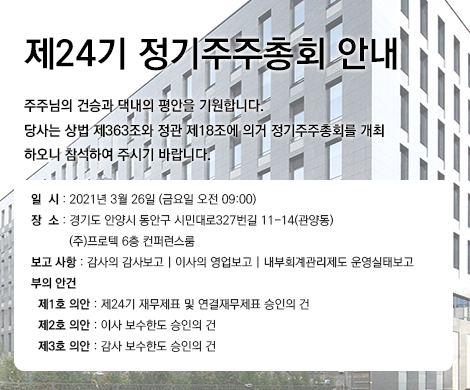
<style>
.page{position:relative;width:470px;height:390px;background:#ffffff}
.page>*{position:absolute;margin:0}
.t1{font:14px "KoPubDotumBold";color:#000000}
.t2{font:36px "KoPubDotumBold";color:#000000}
.t3{font:12px "KoPubDotumBold";color:#000000}
.t4{font:12px "KoPubDotumLight";color:#000000}
</style>
<div class="page">
<p class="t1" style="left:24px;top:37px;width:390px;height:315px"><span class="t2">제24기 정기주주총회 안내<br></span>주주님의 건승과 댁내의 평안을 기원합니다.<br>당사는 상법 제363조와 정관 제18조에 의거 정기주주총회를 개최<br>하오니 참석하여 주시기 바랍니다.<br><br><span class="t3">  일  시</span><span class="t4"> : 2021년 3월 26일 (금요일 오전 09:00)<br></span><span class="t3">  장  소</span><span class="t4"> : 경기도 안양시 동안구 시민대로327번길 11-14(관양동)<br>             (주)프로텍 6층 컨퍼런스룸<br></span><span class="t3">  보고 사항</span><span class="t4"> : 감사의 감사보고 | 이사의 영업보고 | 내부회계관리제도 운영실태보고<br></span><span class="t3">  부의 안건<br>    제1호 의안</span><span class="t4"> : 제24기 재무제표 및 연결재무제표 승인의 건<br>    </span><span class="t3">제2호 의안</span><span class="t4"> : 이사 보수한도 승인의 건<br>    </span><span class="t3">제3호 의안</span><span class="t4"> : 감사 보수한도 승인의 건</span></p>
</div>
